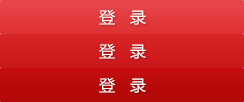
<style>
.page{position:relative;width:244px;height:102px}
.page>*{position:absolute;margin:0}
.t1{font:16px "MicrosoftYaHei";letter-spacing:0.01em;color:#ffffff}
</style>
<div class="page">
<p class="t1" style="left:99px;top:9px;width:47px;height:16px">登   录</p>
<p class="t1" style="left:99px;top:43px;width:47px;height:16px">登   录</p>
<p class="t1" style="left:99px;top:77px;width:47px;height:16px">登   录</p>
</div>
